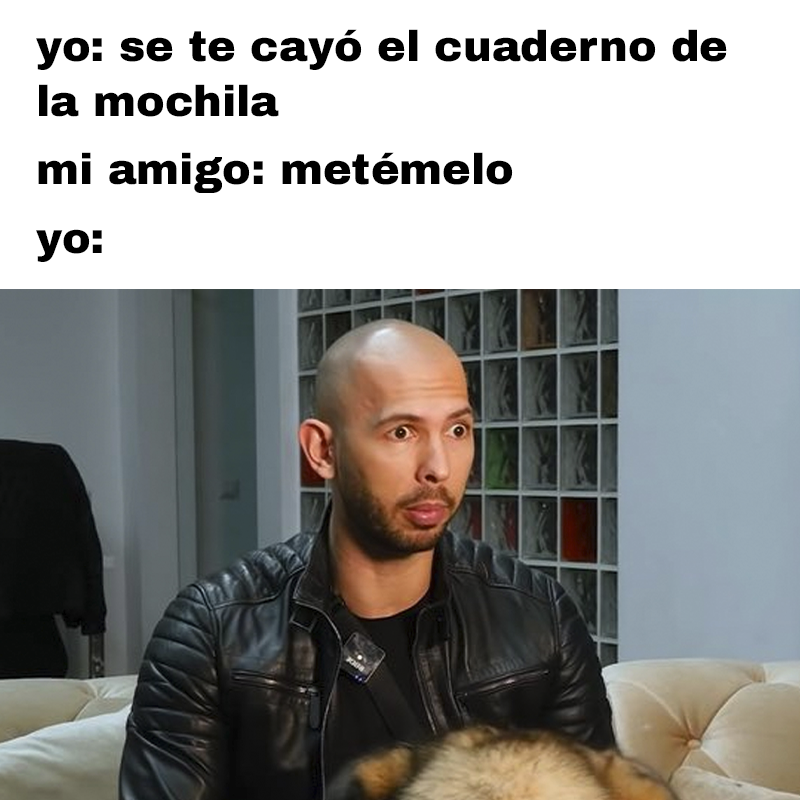
<style>
.page{position:relative;width:800px;height:800px;background:#ffffff}
.page>*{position:absolute;margin:0}
.t1{font:43px "ArchivoBlack-Regular";color:#000000}
</style>
<div class="page">
<p class="t1" style="left:36px;top:29px;width:691px;height:233px">yo: se te cayó el cuaderno de<br>la mochila<br>mi amigo: metémelo<br>yo:</p>
</div>
